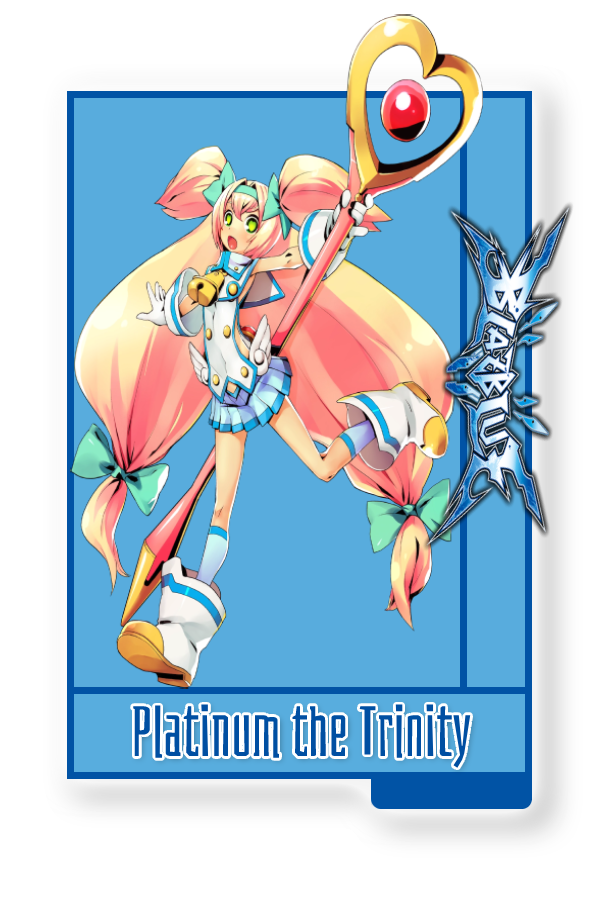
<style>
.page{position:relative;width:600px;height:900px;background:#ffffff}
.page>*{position:absolute;margin:0}
.t1{font:70px "Bahianita-Regular";color:#004fa2}
</style>
<div class="page">
<p class="t1" style="left:133px;top:704px;width:338px;height:64px">Platinum the Trinity</p>
</div>
